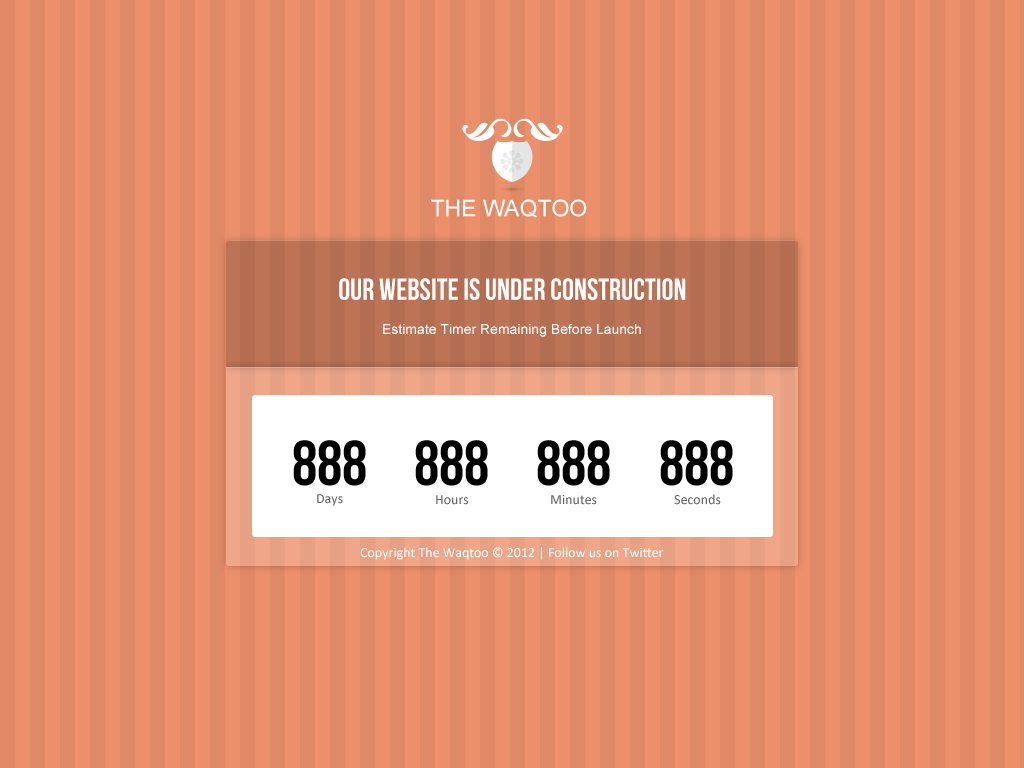
<style>
.page{position:relative;width:1024px;height:768px;background:#e08966}
.page>*{position:absolute;margin:0}
.t1{font:22.9px "ArialMT";color:#ffffff}
.t2{font:30.3px "BebasNeue";color:#ffffff}
.t3{font:14px "ArialMT";color:#fefefe}
.t4{font:63.1px "BebasNeue";color:#000000}
.t5{font:14px "Calibri";color:#666666}
.t6{font:14px "Calibri";color:#ffffff}
</style>
<div class="page">
<p class="t1" style="left:431px;top:199px;width:156px;height:19px">THE WAQTOO</p>
<p class="t2" style="left:339px;top:278px;width:347px;height:22px">Our Website is Under Construction</p>
<p class="t3" style="left:383px;top:324px;width:258px;height:13px">Estimate Timer Remaining Before Launch</p>
<p class="t4" style="left:293px;top:440px;width:73px;height:46px">888</p>
<p class="t4" style="left:415px;top:440px;width:73px;height:46px">888</p>
<p class="t4" style="left:537px;top:440px;width:73px;height:46px">888</p>
<p class="t4" style="left:660px;top:440px;width:73px;height:46px">888</p>
<p class="t5" style="left:317px;top:494px;width:26px;height:12px">Days</p>
<p class="t5" style="left:436px;top:495px;width:32px;height:10px">Hours</p>
<p class="t5" style="left:551px;top:495px;width:46px;height:10px">Minutes</p>
<p class="t5" style="left:674px;top:494px;width:47px;height:11px">Seconds</p>
<p class="t6" style="left:360px;top:547px;width:303px;height:13px">Copyright The Waqtoo © 2012 | Follow us on Twitter</p>
</div>
